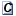
<style>
.page{position:relative;width:16px;height:16px;background:#ffffff}
.page>*{position:absolute;margin:0}
.t1{font:12px "Arial-BoldItalicMT";color:#000000}
</style>
<div class="page">
<p class="t1" style="left:4px;top:3px;width:8px;height:9px">C</p>
</div>
